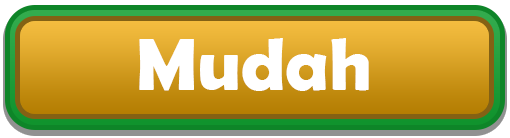
<style>
.page{position:relative;width:510px;height:138px}
.page>*{position:absolute;margin:0}
.t1{font:75px "BerlinSansFBDemi-Bold";color:#ffffff}
</style>
<div class="page">
<p class="t1" style="left:139px;top:38px;width:230px;height:53px">Mudah</p>
</div>
